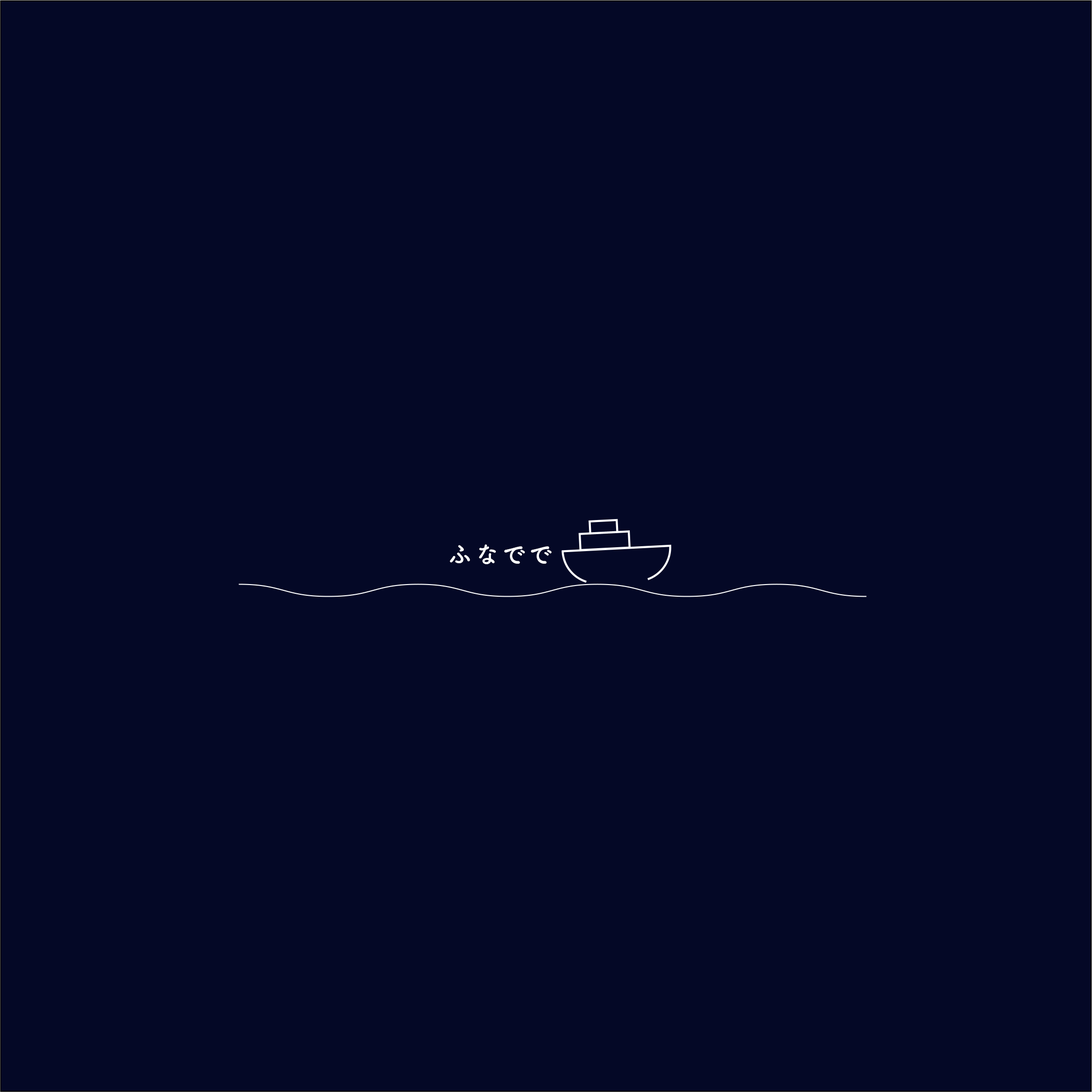
<style>
.page{position:relative;width:1092px;height:1092px;background:#040826}
.page>*{position:absolute;margin:0}
.t1{font:24.3px "TsukuARdGothicStd-B";letter-spacing:0.1em;color:#ffffff}
</style>
<div class="page">
<p class="t1" style="left:450px;top:544px;width:102px;height:20px">ふなでで</p>
</div>
